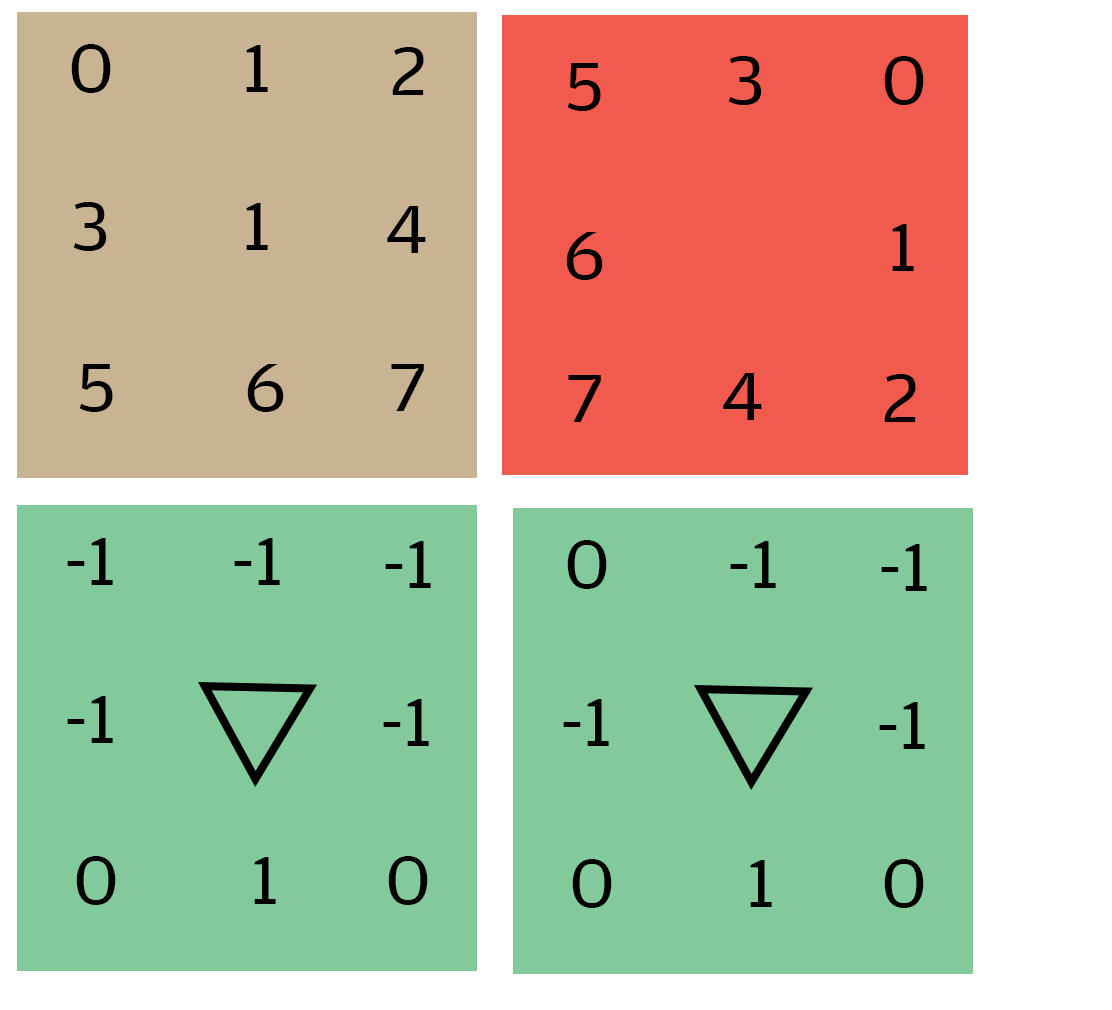
<style>
.page{position:relative;width:1112px;height:1010px;background:#82ca9c}
.page>*{position:absolute;margin:0}
.t1{font:72px "AmplitudeWide-Book";color:#000000}
</style>
<div class="page">
<p class="t1" style="left:71px;top:44px;width:40px;height:49px">0</p>
<p class="t1" style="left:246px;top:45px;width:22px;height:47px">1</p>
<p class="t1" style="left:392px;top:47px;width:32px;height:48px">2</p>
<p class="t1" style="left:567px;top:63px;width:34px;height:48px">5</p>
<p class="t1" style="left:728px;top:56px;width:34px;height:49px">3</p>
<p class="t1" style="left:884px;top:56px;width:40px;height:49px">0</p>
<p class="t1" style="left:73px;top:202px;width:34px;height:49px">3</p>
<p class="t1" style="left:246px;top:203px;width:22px;height:47px">1</p>
<p class="t1" style="left:387px;top:206px;width:39px;height:47px">4</p>
<p class="t1" style="left:566px;top:232px;width:37px;height:48px">6</p>
<p class="t1" style="left:892px;top:224px;width:22px;height:47px">1</p>
<p class="t1" style="left:79px;top:364px;width:34px;height:48px">5</p>
<p class="t1" style="left:247px;top:364px;width:37px;height:48px">6</p>
<p class="t1" style="left:391px;top:364px;width:33px;height:47px">7</p>
<p class="t1" style="left:568px;top:375px;width:33px;height:47px">7</p>
<p class="t1" style="left:723px;top:373px;width:39px;height:47px">4</p>
<p class="t1" style="left:884px;top:374px;width:32px;height:48px">2</p>
<p class="t1" style="left:67px;top:538px;width:46px;height:47px">-1</p>
<p class="t1" style="left:234px;top:538px;width:46px;height:47px">-1</p>
<p class="t1" style="left:385px;top:541px;width:46px;height:47px">-1</p>
<p class="t1" style="left:567px;top:540px;width:40px;height:49px">0</p>
<p class="t1" style="left:730px;top:541px;width:46px;height:47px">-1</p>
<p class="t1" style="left:881px;top:544px;width:46px;height:47px">-1</p>
<p class="t1" style="left:67px;top:696px;width:46px;height:47px">-1</p>
<p class="t1" style="left:383px;top:699px;width:46px;height:47px">-1</p>
<p class="t1" style="left:563px;top:699px;width:46px;height:47px">-1</p>
<p class="t1" style="left:879px;top:702px;width:46px;height:47px">-1</p>
<p class="t1" style="left:76px;top:856px;width:40px;height:49px">0</p>
<p class="t1" style="left:254px;top:857px;width:22px;height:47px">1</p>
<p class="t1" style="left:388px;top:856px;width:40px;height:49px">0</p>
<p class="t1" style="left:572px;top:859px;width:40px;height:49px">0</p>
<p class="t1" style="left:750px;top:860px;width:22px;height:47px">1</p>
<p class="t1" style="left:884px;top:859px;width:40px;height:49px">0</p>
</div>
